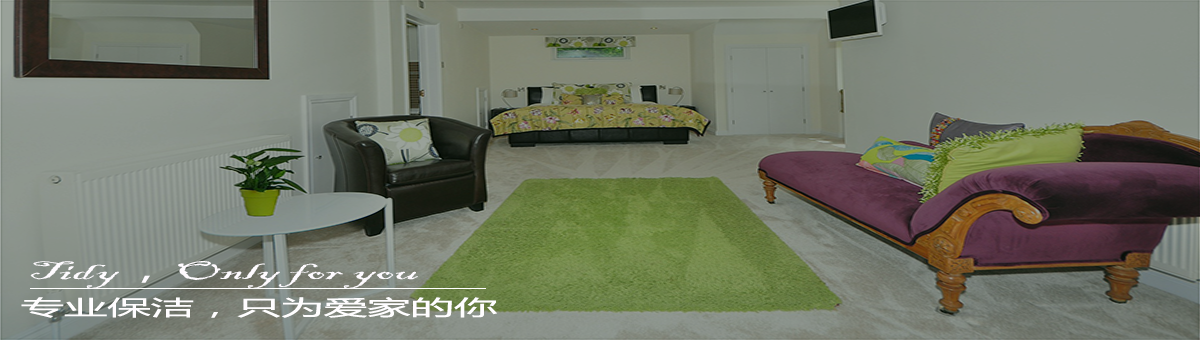
<style>
.page{position:relative;width:1200px;height:340px}
.page>*{position:absolute;margin:0}
.t1{font:27px "BlackadderITC-Regular";color:#fefbff;scale:2.08 1}
.t2{font:27px "MicrosoftYaHei";color:#fefbff;scale:2.08 1}
.t3{font:20.8px "MicrosoftYaHei";color:#fefbff;scale:2.08 1}
</style>
<div class="page">
<p class="t1" style="left:30px;top:261px;width:388px;height:28px">Tidy<span class="t2">，</span>Only for you</p>
<p class="t3" style="left:21px;top:297px;width:476px;height:21px">专业保洁，只为爱家的你</p>
</div>
